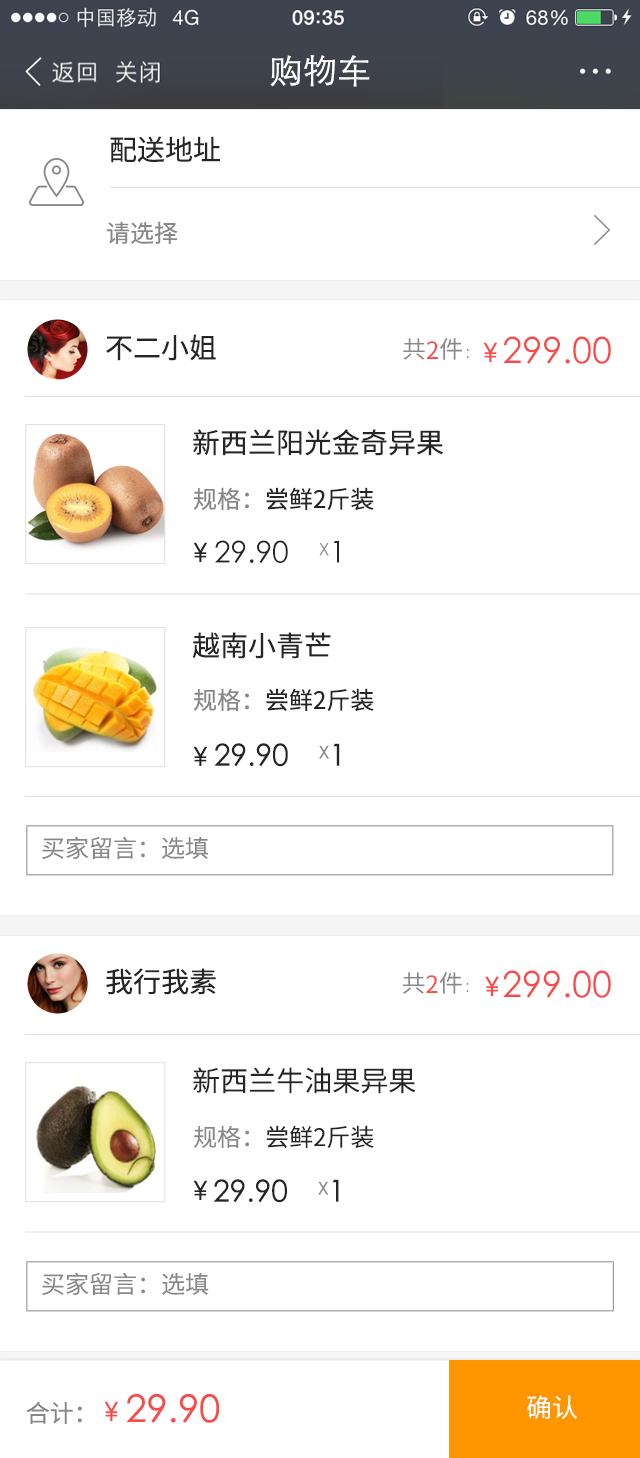
<style>
.page{position:relative;width:640px;height:1458px;background:#ffffff}
.page>*{position:absolute;margin:0}
.t1{font:34px "STXihei";color:#ffffff}
.t2{font:28px "SourceHanSansCN-Regular";color:#252525}
.t3{font:24px "SourceHanSansCN-Regular";color:#888888}
.t4{font:36px "STXihei";color:#fa4b4b}
.t5{font:24px "SourceHanSansCN-Regular";color:#fa4b4b}
.t6{font:18px "STXihei";color:#888888}
.t7{font:45px "STXihei";color:#fa4b4b}
.t8{font:24px "SourceHanSansCN-Regular";color:#252525}
.t9{font:45px "STXihei";color:#252525}
.t10{font:30px "STXihei";color:#252525}
.t11{font:30px "STXihei";color:#888888}
.t12{font:24px "SourceHanSansCN-Normal";color:#888888}
.t13{font:28px "SourceHanSansCN-Normal";color:#252525}
.t14{font:24px "SourceHanSansCN-Normal";color:#252525}
.t15{font:38px "STXihei";color:#fa4b4b}
.t16{font:26px "SourceHanSansCN-Regular";color:#ffffff}
</style>
<div class="page">
<p class="t1" style="left:270px;top:55px;width:100px;height:32px">购物车</p>
<p class="t2" style="left:110px;top:136px;width:110px;height:27px">配送地址</p>
<p class="t3" style="left:107px;top:221px;width:71px;height:23px">请选择</p>
<p class="t2" style="left:106px;top:334px;width:110px;height:27px">不二小姐</p>
<p class="t4" style="left:403px;top:336px;width:208px;height:28px"><span class="t3">共</span><span class="t5">2</span><span class="t3">件</span><span class="t6">：    </span>299.00</p>
<p class="t7" style="left:483px;top:342px;width:15px;height:20px">¥</p>
<p class="t2" style="left:193px;top:429px;width:250px;height:27px">新西兰阳光金奇异果</p>
<p class="t8" style="left:193px;top:487px;width:181px;height:23px"><span class="t3">规格：</span>尝鲜2斤装</p>
<p class="t9" style="left:193px;top:542px;width:15px;height:20px">¥</p>
<p class="t10" style="left:215px;top:540px;width:124px;height:23px">29.90    <span class="t11">X</span>1</p>
<p class="t2" style="left:192px;top:632px;width:139px;height:27px">越南小青芒</p>
<p class="t8" style="left:193px;top:688px;width:181px;height:23px"><span class="t3">规格：</span>尝鲜2斤装</p>
<p class="t9" style="left:193px;top:746px;width:15px;height:20px">¥</p>
<p class="t10" style="left:214px;top:743px;width:126px;height:24px">29.90    <span class="t11">X</span>1</p>
<p class="t12" style="left:42px;top:836px;width:166px;height:23px">买家留言：选填</p>
<p class="t2" style="left:106px;top:968px;width:110px;height:27px">我行我素</p>
<p class="t4" style="left:402px;top:970px;width:209px;height:28px"><span class="t3">共</span><span class="t5">2</span><span class="t3">件</span><span class="t6">：    </span>299.00</p>
<p class="t7" style="left:485px;top:976px;width:14px;height:20px">¥</p>
<p class="t13" style="left:193px;top:1067px;width:223px;height:27px">新西兰牛油果异果</p>
<p class="t14" style="left:194px;top:1125px;width:180px;height:23px"><span class="t12">规格：</span>尝鲜2斤装</p>
<p class="t9" style="left:193px;top:1180px;width:15px;height:20px">¥</p>
<p class="t10" style="left:213px;top:1179px;width:126px;height:24px">29.90    <span class="t11">X</span>1</p>
<p class="t12" style="left:42px;top:1272px;width:167px;height:23px">买家留言：选填</p>
<p class="t15" style="left:26px;top:1394px;width:193px;height:30px"><span class="t3">合计：     </span>29.90</p>
<p class="t16" style="left:527px;top:1395px;width:51px;height:24px">确认</p>
<p class="t7" style="left:104px;top:1401px;width:15px;height:20px">¥</p>
</div>
